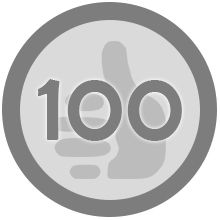
<style>
.page{position:relative;width:220px;height:220px;background:#7d7d7d}
.page>*{position:absolute;margin:0}
.t1{font:100px "BerlinSansFB-Reg";color:#7d7d7d}
</style>
<div class="page">
<p class="t1" style="left:38px;top:79px;width:144px;height:62px">100</p>
</div>
